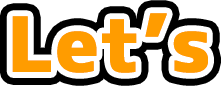
<style>
.page{position:relative;width:222px;height:86px;background:#ffffff}
.page>*{position:absolute;margin:0}
.t1{font:75px "mplus-1c-heavy";color:#ff9c00;font-weight:bold}
</style>
<div class="page">
<p class="t1" style="left:12px;top:13px;width:196px;height:60px">Let’s</p>
<p class="t1" style="left:12px;top:13px;width:196px;height:60px">Let’s</p>
<p class="t1" style="left:12px;top:13px;width:196px;height:60px">Let’s</p>
</div>
